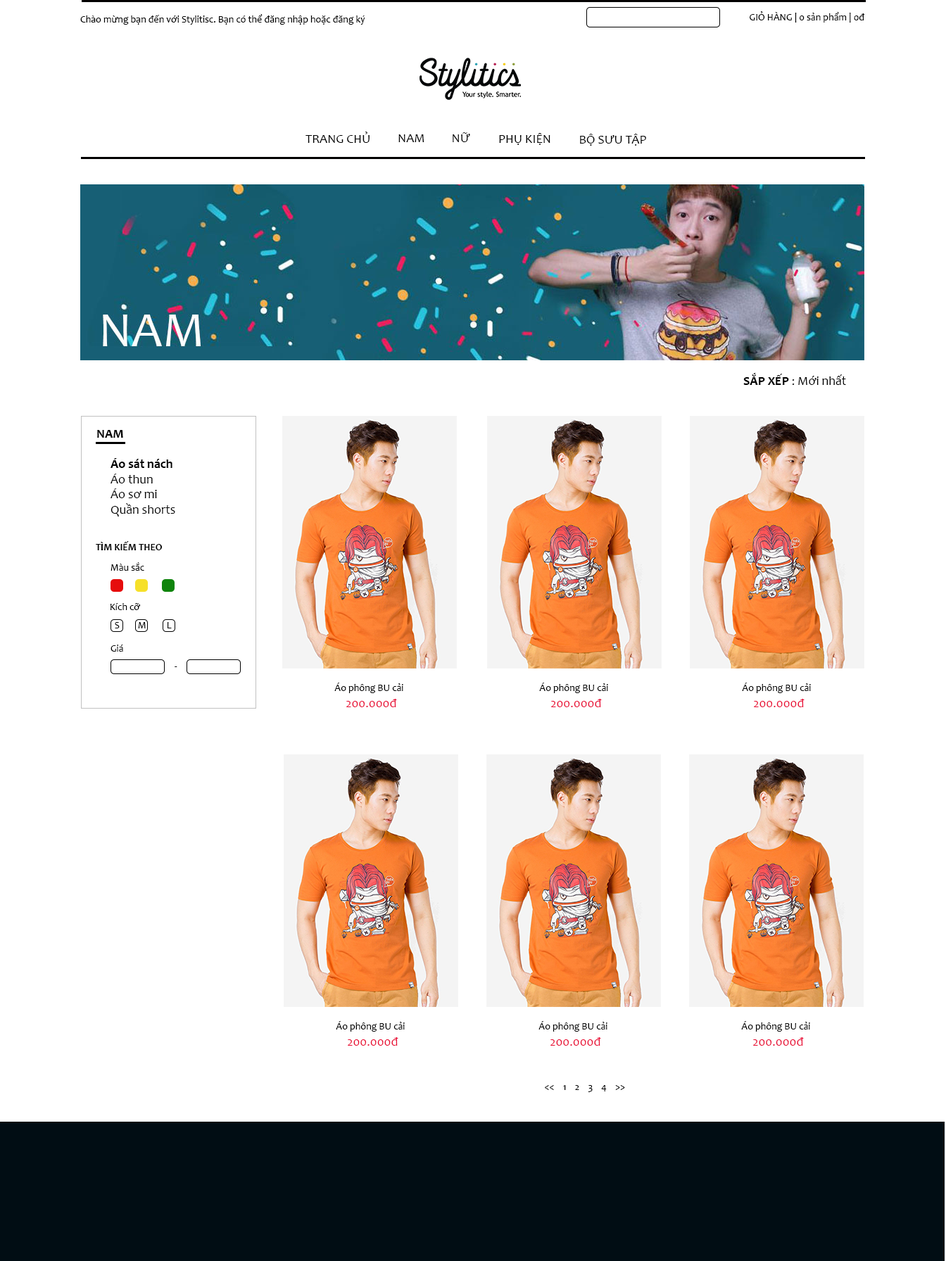
<style>
.page{position:relative;width:946px;height:1261px;background:#ffffff}
.page>*{position:absolute;margin:0}
.t1{font:9.9px "Candara";color:#000000}
.t2{font:12.7px "Candara";color:#000000}
.t3{font:12.7px "Candara-Bold";color:#000000}
.t4{font:9.9px "Candara-Bold";color:#000000}
.t5{font:12.7px "Candara";color:#e90d36}
</style>
<div class="page">
<p class="t1" style="left:80px;top:14px;width:285px;height:11px">Chào mừng bạn đến với Stylitisc. Bạn có thể đăng nhập hoặc đăng ký</p>
<p class="t1" style="left:749px;top:11px;width:115px;height:12px">GIỎ HÀNG | 0 sản phẩm | 0đ</p>
<p class="t2" style="left:305px;top:132px;width:64px;height:11px">TRANG CHỦ</p>
<p class="t2" style="left:398px;top:134px;width:26px;height:8px">NAM</p>
<p class="t2" style="left:452px;top:132px;width:18px;height:10px">NỮ</p>
<p class="t2" style="left:499px;top:133px;width:51px;height:12px">PHỤ KIỆN</p>
<p class="t2" style="left:580px;top:134px;width:66px;height:12px">BỘ SƯU TẬP</p>
<p class="t2" style="left:743px;top:373px;width:103px;height:12px"><span class="t3">SẮP XẾP</span> : Mới nhất</p>
<p class="t3" style="left:97px;top:430px;width:26px;height:8px">NAM</p>
<p class="t2" style="left:110px;top:458px;width:65px;height:58px"><span class="t3">Áo sát nách<br></span>Áo thun<br>Áo sơ mi<br>Quần shorts</p>
<p class="t4" style="left:96px;top:541px;width:67px;height:9px">TÌM KIẾM THEO</p>
<p class="t1" style="left:110px;top:562px;width:34px;height:9px">Màu sắc</p>
<p class="t1" style="left:110px;top:603px;width:31px;height:7px">Kích cỡ</p>
<p class="t1" style="left:115px;top:622px;width:5px;height:6px">S</p>
<p class="t1" style="left:138px;top:622px;width:8px;height:6px">M</p>
<p class="t1" style="left:167px;top:622px;width:5px;height:6px">L</p>
<p class="t1" style="left:110px;top:645px;width:13px;height:7px">Giá</p>
<p class="t1" style="left:175px;top:666px;width:2px;height:1px">-</p>
<p class="t1" style="left:334px;top:683px;width:69px;height:10px">Áo phông BU cải</p>
<p class="t1" style="left:539px;top:683px;width:69px;height:10px">Áo phông BU cải</p>
<p class="t1" style="left:742px;top:683px;width:69px;height:10px">Áo phông BU cải</p>
<p class="t5" style="left:346px;top:699px;width:51px;height:8px">200.000đ</p>
<p class="t5" style="left:551px;top:699px;width:51px;height:8px">200.000đ</p>
<p class="t5" style="left:754px;top:699px;width:50px;height:8px">200.000đ</p>
<p class="t1" style="left:336px;top:1021px;width:69px;height:11px">Áo phông BU cải</p>
<p class="t1" style="left:538px;top:1021px;width:69px;height:11px">Áo phông BU cải</p>
<p class="t1" style="left:741px;top:1021px;width:69px;height:11px">Áo phông BU cải</p>
<p class="t5" style="left:348px;top:1037px;width:50px;height:9px">200.000đ</p>
<p class="t5" style="left:550px;top:1037px;width:51px;height:9px">200.000đ</p>
<p class="t5" style="left:753px;top:1037px;width:51px;height:9px">200.000đ</p>
<p class="t1" style="left:545px;top:1085px;width:80px;height:7px">&lt;&lt;    1    2    3    4    &gt;&gt;</p>
</div>
